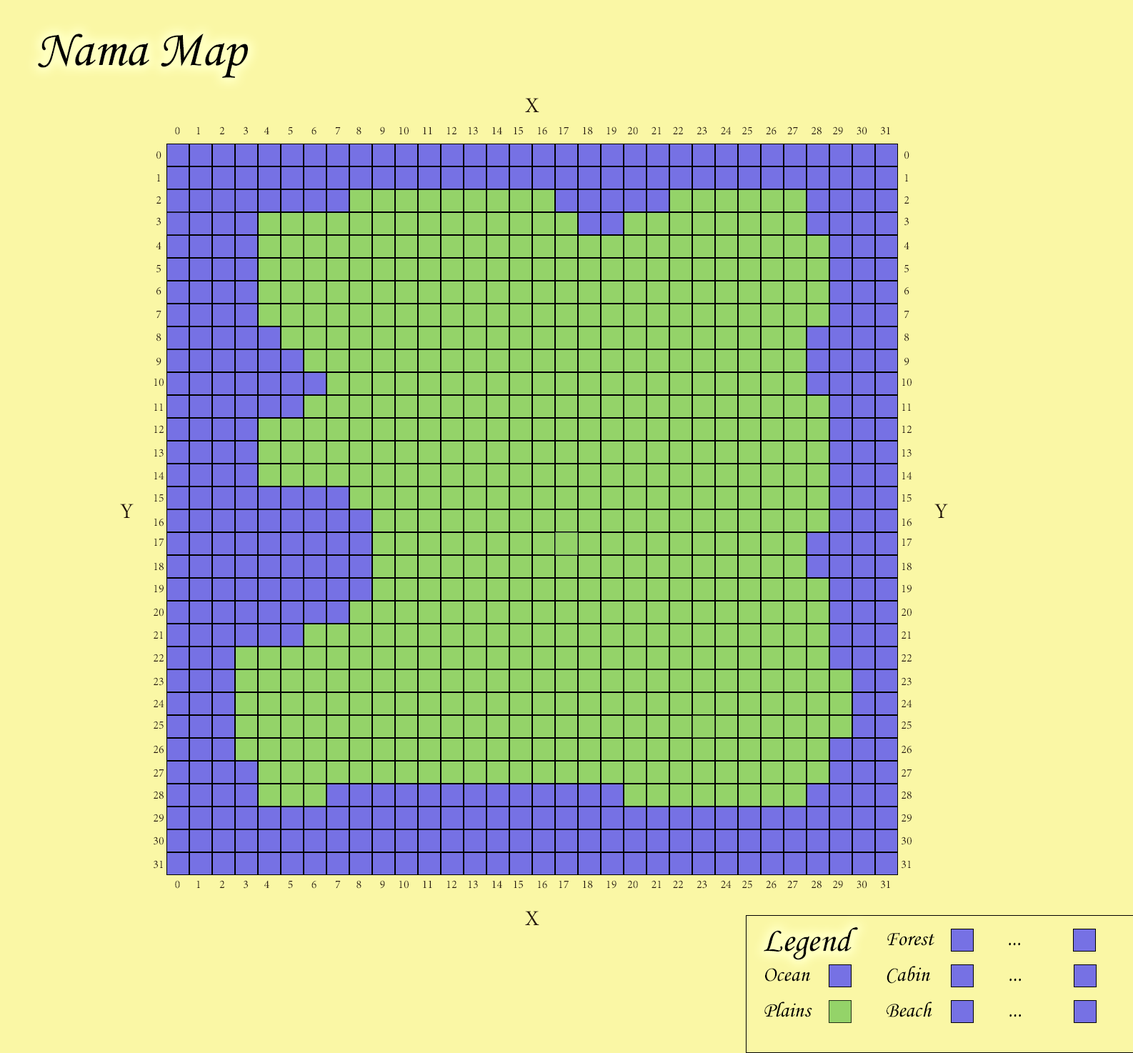
<style>
.page{position:relative;width:1133px;height:1053px;background:#faf7a5}
.page>*{position:absolute;margin:0}
.t1{font:51.4px "MonotypeCorsiva";color:#000000}
.t2{font:21.4px "MinionPro-Regular";color:#24160d}
.t3{font:11.4px "MinionPro-Regular";color:#24160d}
.t4{font:34.3px "MonotypeCorsiva";color:#000000}
.t5{font:21.4px "MonotypeCorsiva";color:#000000}
</style>
<div class="page">
<p class="t1" style="left:38px;top:34px;width:210px;height:44px">Nama Map</p>
<p class="t2" style="left:525px;top:98px;width:14px;height:14px">X</p>
<p class="t3" style="left:175px;top:126px;width:715px;height:9px">0      1       2       3      4       5       6       7      8       9     10     11     12    13     14    15     16    17     18     19    20     21    22     23     24    25     26    27     28    29     30     31</p>
<p class="t3" style="left:156px;top:151px;width:5px;height:8px">0</p>
<p class="t3" style="left:904px;top:151px;width:5px;height:8px">0</p>
<p class="t3" style="left:157px;top:174px;width:4px;height:7px">1</p>
<p class="t3" style="left:905px;top:174px;width:3px;height:7px">1</p>
<p class="t3" style="left:156px;top:196px;width:5px;height:8px">2</p>
<p class="t3" style="left:904px;top:196px;width:5px;height:8px">2</p>
<p class="t3" style="left:156px;top:217px;width:5px;height:9px">3</p>
<p class="t3" style="left:904px;top:217px;width:4px;height:9px">3</p>
<p class="t3" style="left:156px;top:241px;width:5px;height:8px">4</p>
<p class="t3" style="left:903px;top:241px;width:6px;height:8px">4</p>
<p class="t3" style="left:156px;top:265px;width:5px;height:8px">5</p>
<p class="t3" style="left:904px;top:265px;width:4px;height:8px">5</p>
<p class="t3" style="left:156px;top:286px;width:5px;height:9px">6</p>
<p class="t3" style="left:904px;top:286px;width:5px;height:9px">6</p>
<p class="t3" style="left:156px;top:311px;width:5px;height:8px">7</p>
<p class="t3" style="left:904px;top:311px;width:5px;height:8px">7</p>
<p class="t3" style="left:156px;top:333px;width:5px;height:8px">8</p>
<p class="t3" style="left:904px;top:333px;width:5px;height:8px">8</p>
<p class="t3" style="left:156px;top:357px;width:5px;height:9px">9</p>
<p class="t3" style="left:904px;top:357px;width:5px;height:9px">9</p>
<p class="t3" style="left:154px;top:378px;width:10px;height:8px">10</p>
<p class="t3" style="left:902px;top:378px;width:9px;height:8px">10</p>
<p class="t3" style="left:154px;top:403px;width:9px;height:8px">11</p>
<p class="t3" style="left:902px;top:403px;width:9px;height:8px">11</p>
<p class="t3" style="left:154px;top:425px;width:10px;height:8px">12</p>
<p class="t3" style="left:902px;top:425px;width:9px;height:8px">12</p>
<p class="t3" style="left:154px;top:449px;width:10px;height:8px">13</p>
<p class="t3" style="left:902px;top:449px;width:9px;height:8px">13</p>
<p class="t3" style="left:154px;top:471px;width:10px;height:8px">14</p>
<p class="t3" style="left:902px;top:471px;width:10px;height:8px">14</p>
<p class="t3" style="left:154px;top:494px;width:10px;height:8px">15</p>
<p class="t3" style="left:902px;top:494px;width:9px;height:8px">15</p>
<p class="t2" style="left:120px;top:504px;width:14px;height:14px">Y</p>
<p class="t2" style="left:934px;top:504px;width:14px;height:14px">Y</p>
<p class="t3" style="left:154px;top:518px;width:10px;height:8px">16</p>
<p class="t3" style="left:902px;top:518px;width:9px;height:8px">16</p>
<p class="t3" style="left:154px;top:538px;width:10px;height:8px">17</p>
<p class="t3" style="left:902px;top:538px;width:10px;height:8px">17</p>
<p class="t3" style="left:154px;top:562px;width:10px;height:9px">18</p>
<p class="t3" style="left:902px;top:562px;width:9px;height:9px">18</p>
<p class="t3" style="left:154px;top:584px;width:10px;height:9px">19</p>
<p class="t3" style="left:902px;top:584px;width:9px;height:9px">19</p>
<p class="t3" style="left:154px;top:608px;width:10px;height:8px">20</p>
<p class="t3" style="left:901px;top:608px;width:10px;height:8px">20</p>
<p class="t3" style="left:154px;top:631px;width:9px;height:7px">21</p>
<p class="t3" style="left:901px;top:631px;width:10px;height:7px">21</p>
<p class="t3" style="left:154px;top:653px;width:10px;height:8px">22</p>
<p class="t3" style="left:901px;top:653px;width:10px;height:8px">22</p>
<p class="t3" style="left:154px;top:677px;width:10px;height:9px">23</p>
<p class="t3" style="left:901px;top:677px;width:10px;height:9px">23</p>
<p class="t3" style="left:154px;top:699px;width:10px;height:8px">24</p>
<p class="t3" style="left:901px;top:699px;width:11px;height:8px">24</p>
<p class="t3" style="left:154px;top:721px;width:10px;height:8px">25</p>
<p class="t3" style="left:901px;top:721px;width:10px;height:8px">25</p>
<p class="t3" style="left:154px;top:745px;width:10px;height:8px">26</p>
<p class="t3" style="left:901px;top:745px;width:10px;height:8px">26</p>
<p class="t3" style="left:154px;top:768px;width:10px;height:9px">27</p>
<p class="t3" style="left:901px;top:768px;width:11px;height:9px">27</p>
<p class="t3" style="left:154px;top:791px;width:10px;height:8px">28</p>
<p class="t3" style="left:901px;top:791px;width:10px;height:8px">28</p>
<p class="t3" style="left:154px;top:813px;width:10px;height:9px">29</p>
<p class="t3" style="left:901px;top:813px;width:10px;height:9px">29</p>
<p class="t3" style="left:154px;top:836px;width:10px;height:9px">30</p>
<p class="t3" style="left:901px;top:836px;width:10px;height:9px">30</p>
<p class="t3" style="left:154px;top:860px;width:9px;height:8px">31</p>
<p class="t3" style="left:901px;top:860px;width:10px;height:8px">31</p>
<p class="t3" style="left:175px;top:880px;width:715px;height:8px">0      1       2       3      4       5       6       7      8       9     10     11     12    13     14    15     16    17     18     19    20     21    22     23     24    25     26    27     28    29     30     31</p>
<p class="t2" style="left:525px;top:911px;width:14px;height:14px">X</p>
<p class="t4" style="left:763px;top:927px;width:95px;height:33px">Legend</p>
<p class="t5" style="left:887px;top:932px;width:47px;height:14px">Forest</p>
<p class="t5" style="left:1008px;top:942px;width:12px;height:4px">...</p>
<p class="t5" style="left:886px;top:966px;width:44px;height:17px">Cabin</p>
<p class="t5" style="left:765px;top:968px;width:45px;height:13px">Ocean</p>
<p class="t5" style="left:1009px;top:978px;width:12px;height:3px">...</p>
<p class="t5" style="left:764px;top:1001px;width:48px;height:16px">Plains</p>
<p class="t5" style="left:886px;top:1001px;width:46px;height:16px">Beach</p>
<p class="t5" style="left:1009px;top:1013px;width:12px;height:4px">...</p>
</div>
